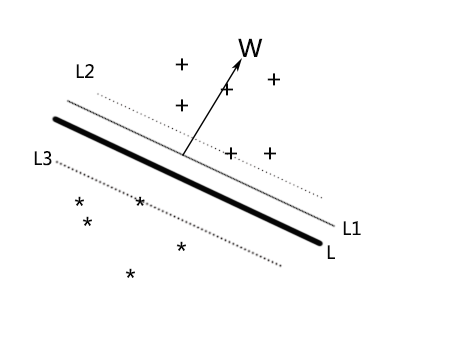
<style>
.page{position:relative;width:454px;height:340px;background:#ffffff}
.page>*{position:absolute;margin:0}
.t1{font:24px "MicrosoftYaHei";color:#050505}
.t2{font:18px "MicrosoftYaHei";color:#050505}
</style>
<div class="page">
<p class="t1" style="left:238px;top:38px;width:25px;height:19px">W</p>
<p class="t2" style="left:76px;top:64px;width:18px;height:14px">L2</p>
<p class="t1" style="left:175px;top:58px;width:13px;height:13px">+</p>
<p class="t1" style="left:267px;top:73px;width:13px;height:13px">+</p>
<p class="t1" style="left:220px;top:83px;width:13px;height:13px">+</p>
<p class="t1" style="left:175px;top:99px;width:13px;height:13px">+</p>
<p class="t1" style="left:224px;top:147px;width:52px;height:13px">+   +</p>
<p class="t2" style="left:34px;top:151px;width:18px;height:15px">L3</p>
<p class="t1" style="left:74px;top:196px;width:71px;height:10px">*       *</p>
<p class="t1" style="left:82px;top:216px;width:10px;height:10px">*</p>
<p class="t2" style="left:343px;top:221px;width:18px;height:14px">L1</p>
<p class="t1" style="left:176px;top:241px;width:10px;height:10px">*</p>
<p class="t2" style="left:327px;top:245px;width:8px;height:14px">L</p>
<p class="t1" style="left:125px;top:268px;width:10px;height:10px">*</p>
</div>
